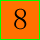
<style>
.page{position:relative;width:40px;height:40px;background:#ff7200}
.page>*{position:absolute;margin:0}
.t1{font:30px "SimSun";color:#000000}
</style>
<div class="page">
<p class="t1" style="left:14px;top:8px;width:13px;height:22px">8</p>
</div>
